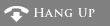
<style>
.page{position:relative;width:110px;height:26px;background:#808080}
.page>*{position:absolute;margin:0}
.t1{font:12px "TrajanPro-Bold";color:#ffffff;scale:1.05 1}
</style>
<div class="page">
<p class="t1" style="left:33px;top:8px;width:62px;height:9px">Hang Up</p>
</div>
